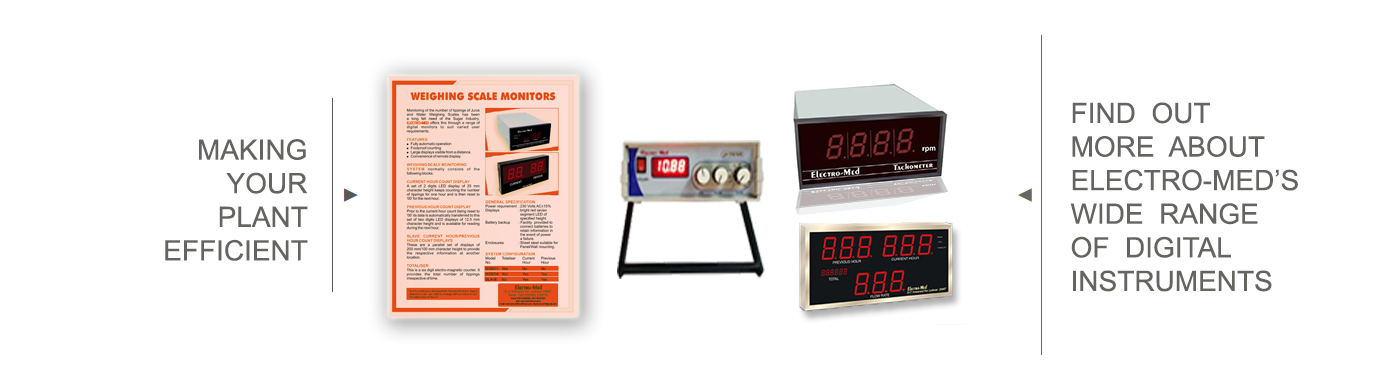
<style>
.page{position:relative;width:1393px;height:377px;background:#ffffff}
.page>*{position:absolute;margin:0}
.t1{font:28px "ArialMT";color:#646560}
</style>
<div class="page">
<p class="t1" style="left:1070px;top:102px;width:228px;height:190px">FIND  OUT<br>MORE  ABOUT<br>ELECTRO-MED’S<br>WIDE  RANGE <br>OF  DIGITAL <br>INSTRUMENTS</p>
<p class="t1" style="left:165px;top:139px;width:143px;height:122px;text-align:right">MAKING<br>YOUR<br>PLANT<br>EFFICIENT</p>
</div>
